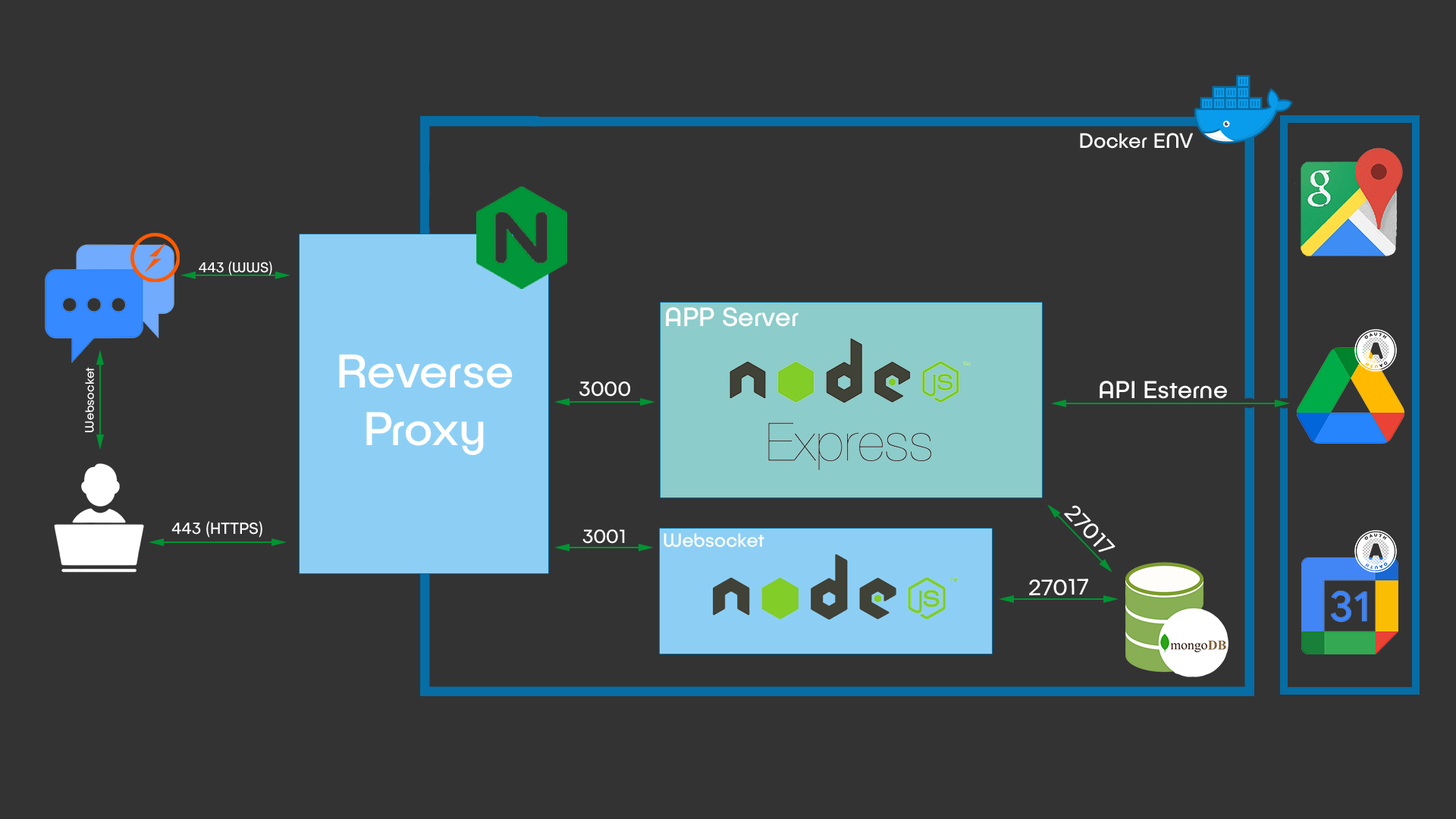
<style>
.page{position:relative;width:1456px;height:819px;background:#333333}
.page>*{position:absolute;margin:0}
.t1{font:21.2px "PublicaPlay-Regular";color:#ffffff}
.t2{font:14.1px "PublicaPlay-Regular";color:#ffffff}
.t3{font:26.9px "PublicaPlay-Regular";color:#ffffff}
.t4{font:47.7px "PublicaPlay-Regular";color:#fefefe}
.t5{font:12.4px "PublicaPlay-Regular";color:#ffffff}
.t6{font:20.5px "PublicaPlay-Regular";color:#ffffff}
.t7{font:24.8px "PublicaPlay-Regular";color:#ffffff}
.t8{font:22.3px "PublicaPlay-Regular";color:#fefefe}
.t9{font:16.3px "PublicaPlay-Regular";color:#ffffff}
.t10{font:19.1px "PublicaPlay-Regular";color:#ffffff}
.t11{font:22.4px "PublicaPlay-Regular";color:#fefefe}
</style>
<div class="page">
<p class="t1" style="left:1080px;top:133px;width:114px;height:16px">Docker ENV</p>
<p class="t2" style="left:199px;top:261px;width:73px;height:14px">443 (WWS)</p>
<p class="t3" style="left:666px;top:307px;width:133px;height:20px">APP Server</p>
<p class="t4" style="left:339px;top:354px;width:174px;height:101px;text-align:center">Reverse<br>Proxy</p>
<p class="t5" style="left:85px;top:367px;width:9px;height:65px;rotate:-90deg">Websocket</p>
<p class="t6" style="left:579px;top:381px;width:51px;height:16px">3000</p>
<p class="t7" style="left:1100px;top:381px;width:127px;height:18px">API Esterne</p>
<p class="t8" style="left:1063px;top:505px;width:52px;height:47px;rotate:47deg">27017</p>
<p class="t9" style="left:171px;top:521px;width:91px;height:17px">443 (HTTPS)</p>
<p class="t10" style="left:582px;top:529px;width:43px;height:15px">3001</p>
<p class="t10" style="left:664px;top:533px;width:100px;height:15px">Websocket</p>
<p class="t11" style="left:1029px;top:579px;width:59px;height:16px;rotate:-1deg">27017</p>
</div>
